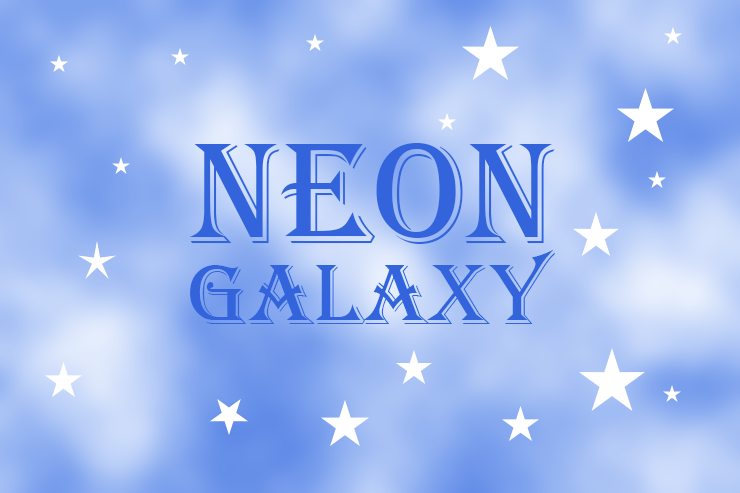
<style>
.page{position:relative;width:740px;height:493px}
.page>*{position:absolute;margin:0}
.t1{font:60px "Algerian";color:#3364db}
</style>
<div class="page">
<p class="t1" style="left:189px;top:143px;width:366px;height:181px">NEON GALAXY</p>
</div>
